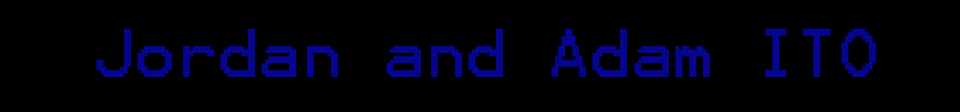
<style>
.page{position:relative;width:960px;height:112px;background:#000000}
.page>*{position:absolute;margin:0}
.t1{font:55.1px "Terminal";color:#050590}
</style>
<div class="page">
<p class="t1" style="left:96px;top:28px;width:780px;height:49px">Jordan and Adam ITO</p>
</div>
